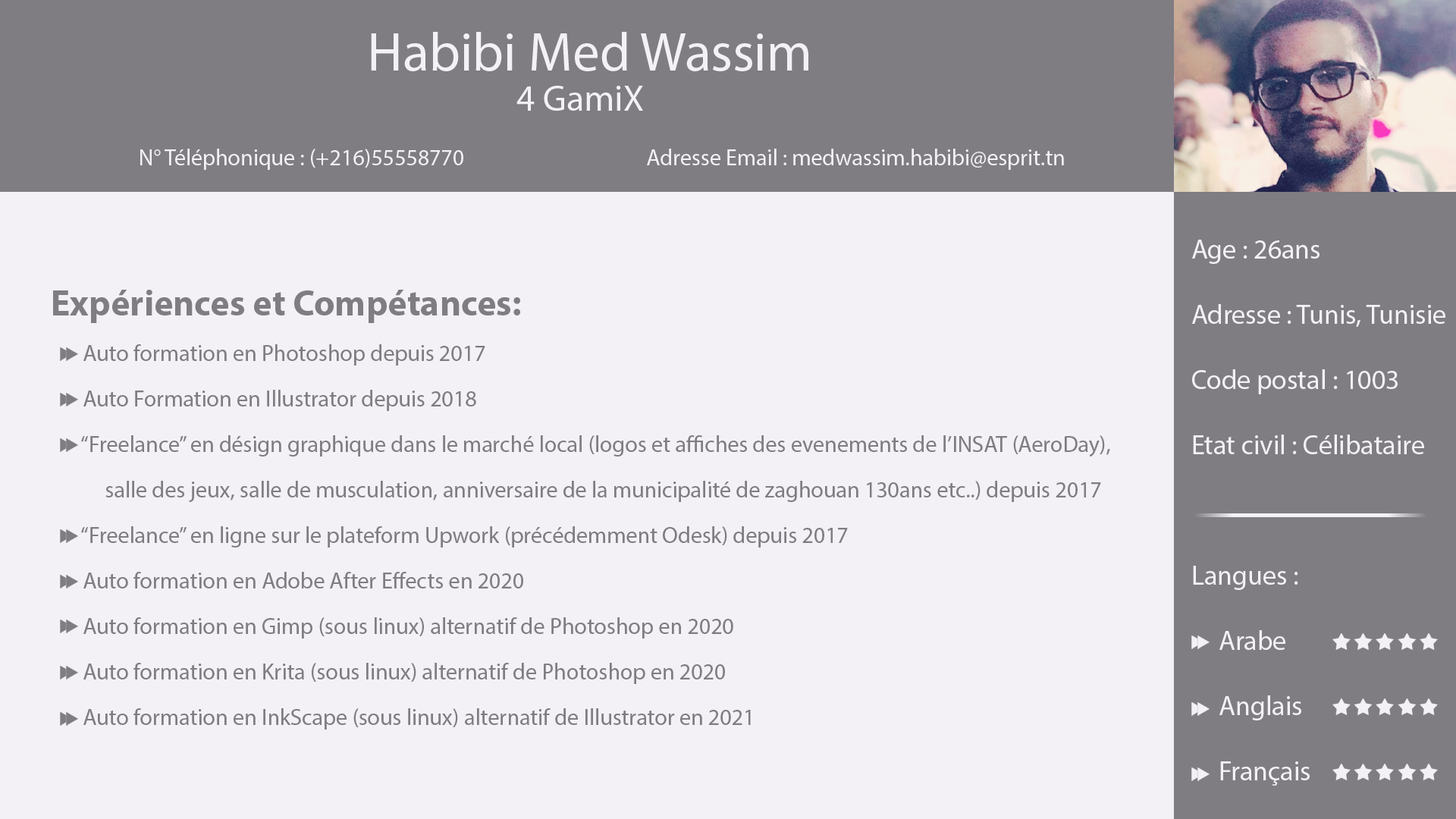
<style>
.page{position:relative;width:1456px;height:819px;background:#f3f1f5}
.page>*{position:absolute;margin:0}
.t1{font:54.6px "MyriadPro-Regular";color:#ffffff}
.t2{font:36.4px "MyriadPro-Regular";color:#ffffff}
.t3{font:22.7px "MyriadPro-Regular";color:#ffffff}
.t4{font:27.3px/65.2px "MyriadPro-Regular";color:#ffffff}
.t5{font:22.7px/45.5px "MyriadPro-Regular";color:#7f7c82}
.t6{font:36.4px "MyriadPro-Bold";color:#7f7c82}
</style>
<div class="page">
<p class="t1" style="left:371px;top:32px;width:437px;height:39px">Habibi Med Wassim</p>
<p class="t2" style="left:516px;top:86px;width:127px;height:25px">4 GamiX</p>
<p class="t3" style="left:140px;top:149px;width:323px;height:21px">N° Téléphonique : (+216)55558770</p>
<p class="t3" style="left:647px;top:149px;width:417px;height:21px">Adresse Email : medwassim.habibi@esprit.tn</p>
<p class="t4" style="left:1192px;top:240px;width:253px;height:546px">Age : 26ans<br>Adresse : Tunis, Tunisie<br>Code postal : 1003<br>Etat civil : Célibataire<br><br>Langues :<br> Arabe<br> Anglais<br> Français</p>
<p class="t5" style="left:53px;top:290px;width:1057px;height:440px"><span class="t6">Expériences et Compétances:<br></span>  Auto formation en Photoshop depuis 2017<br>  Auto Formation en Illustrator depuis 2018<br>  “Freelance” en désign graphique dans le marché local (logos et affiches des evenements de l’INSAT (AeroDay), <br>  salle des jeux, salle de musculation, anniversaire de la municipalité de zaghouan 130ans etc..) depuis 2017<br>  “Freelance” en ligne sur le plateform Upwork (précédemment Odesk) depuis 2017<br>  Auto formation en Adobe After Effects en 2020<br>  Auto formation en Gimp (sous linux) alternatif de Photoshop en 2020<br>  Auto formation en Krita (sous linux) alternatif de Photoshop en 2020<br>  Auto formation en InkScape (sous linux) alternatif de Illustrator en 2021</p>
</div>
